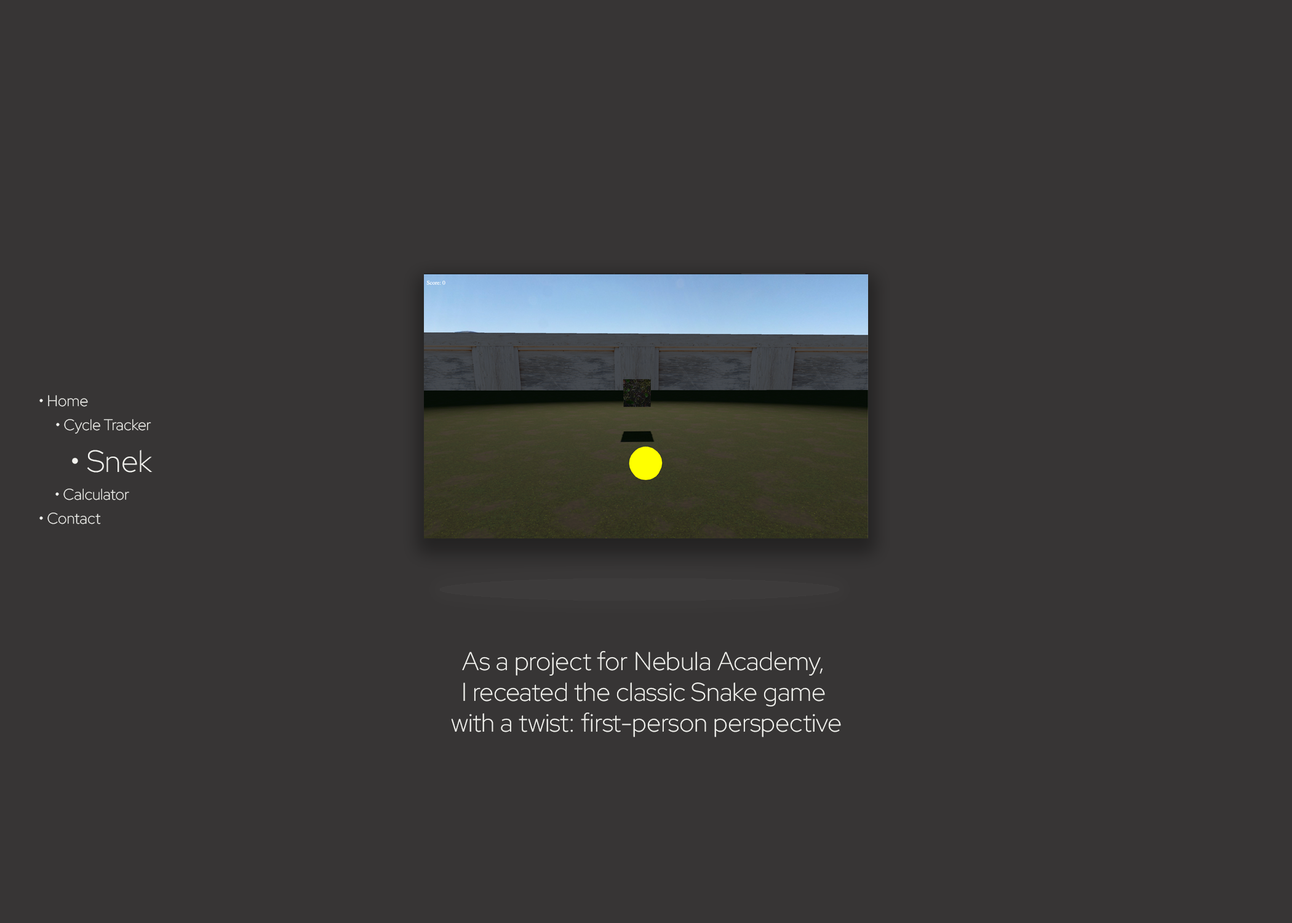
<style>
.page{position:relative;width:1292px;height:923px;background:#373535}
.page>*{position:absolute;margin:0}
.t1{font:15.4px "RedHatDisplay-Light";color:#f3f3ef}
.t2{font:30.8px "RedHatDisplay-Light";color:#f3f3ef}
.t3{font:25.6px "RedHatDisplay-Light";color:#f3f3ef}
</style>
<div class="page">
<p class="t1" style="left:39px;top:395px;width:49px;height:12px">• Home</p>
<p class="t1" style="left:56px;top:419px;width:95px;height:15px">• Cycle Tracker</p>
<p class="t2" style="left:72px;top:450px;width:81px;height:23px">• Snek</p>
<p class="t1" style="left:55px;top:489px;width:74px;height:11px">• Calculator</p>
<p class="t1" style="left:39px;top:513px;width:62px;height:11px">• Contact</p>
<p class="t3" style="left:451px;top:650px;width:390px;height:87px;text-align:center">As a project for Nebula Academy, <br>I receated the classic Snake game <br>with a twist: first-person perspective</p>
</div>
